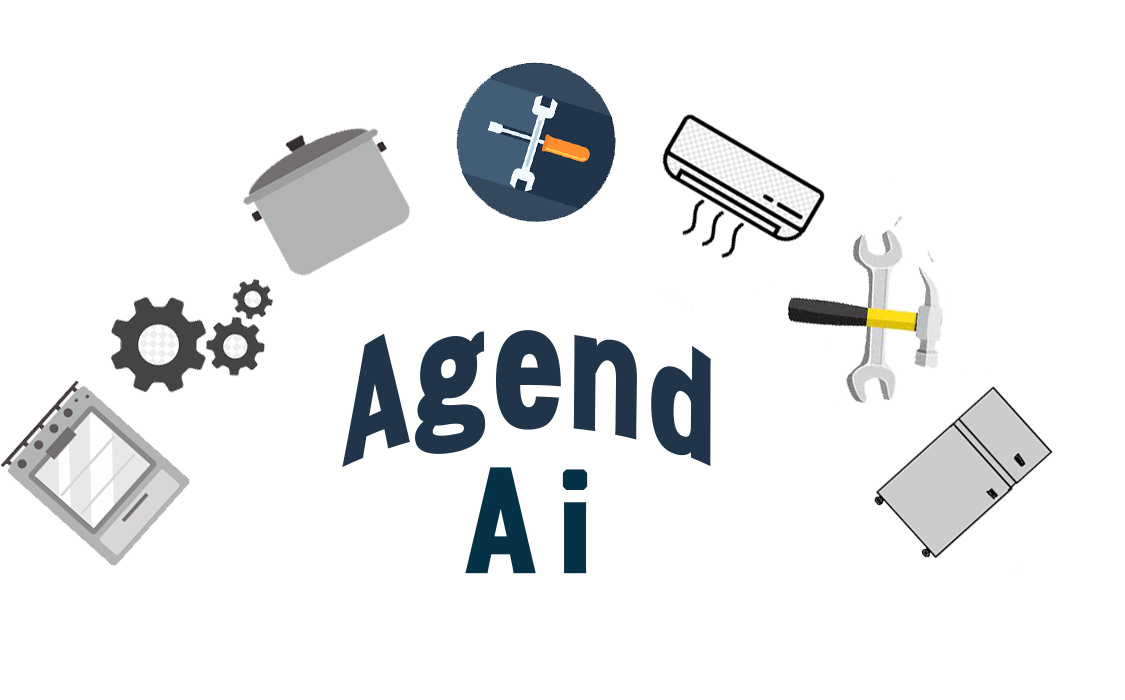
<style>
.page{position:relative;width:1125px;height:700px;background:#ffffff}
.page>*{position:absolute;margin:0}
.t1{font:150px "DFGothic-EB-WIN-RKSJ-H";color:#203549}
.t2{font:150px "DFGothic-EB-WIN-RKSJ-H";color:#063248}
</style>
<div class="page">
<p class="t1" style="left:342px;top:330px;width:369px;height:138px">Agend</p>
<p class="t2" style="left:465px;top:467px;width:123px;height:107px">Ai</p>
</div>
